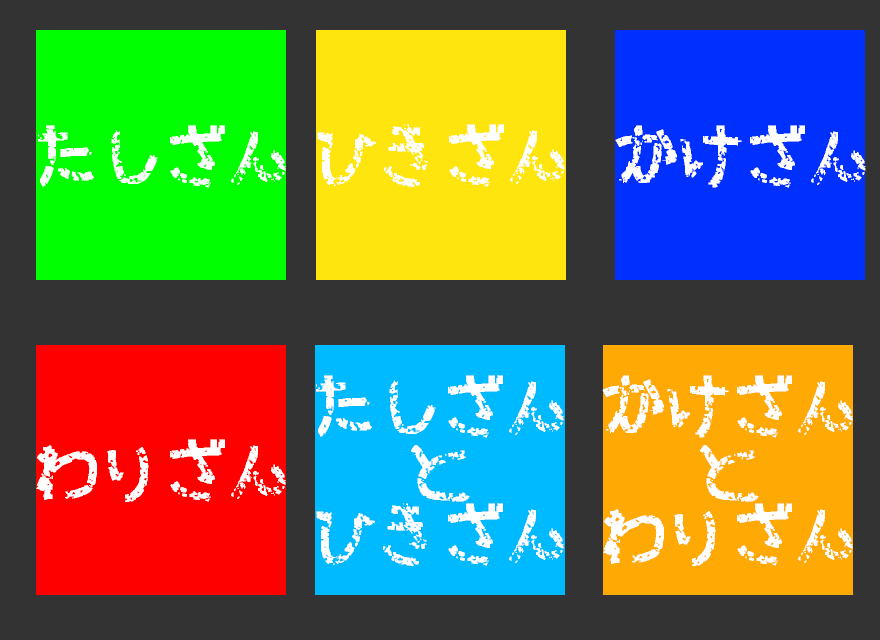
<style>
.page{position:relative;width:880px;height:640px;background:#333333}
.page>*{position:absolute;margin:0}
.t1{font:64px "FontFace";color:#ffffff}
.t2{font:64px/64px "FontFace";color:#ffffff}
</style>
<div class="page">
<p class="t1" style="left:38px;top:125px;width:248px;height:63px">たしざん</p>
<p class="t1" style="left:317px;top:124px;width:248px;height:63px">ひきざん</p>
<p class="t1" style="left:615px;top:125px;width:251px;height:63px">かけざん</p>
<p class="t2" style="left:316px;top:375px;width:248px;height:191px;text-align:center">たしざん<br>と<br>ひきざん</p>
<p class="t2" style="left:602px;top:375px;width:251px;height:191px;text-align:center">かけざん<br>と<br>わりざん</p>
<p class="t1" style="left:36px;top:439px;width:250px;height:63px">わりざん</p>
</div>
